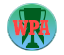
<style>
.page{position:relative;width:64px;height:55px;background:#ffffff}
.page>*{position:absolute;margin:0}
.t1{font:21.5px "Rockwell-CondensedBold";color:#ff4545}
</style>
<div class="page">
<p class="t1" style="left:12px;top:20px;width:38px;height:16px">WPA</p>
</div>
